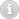
<style>
.page{position:relative;width:19px;height:19px}
.page>*{position:absolute;margin:0}
.t1{font:15px "Georgia-Bold";letter-spacing:0.02em;color:#ffffff}
</style>
<div class="page">
<p class="t1" style="left:7px;top:4px;width:5px;height:10px">i</p>
</div>
